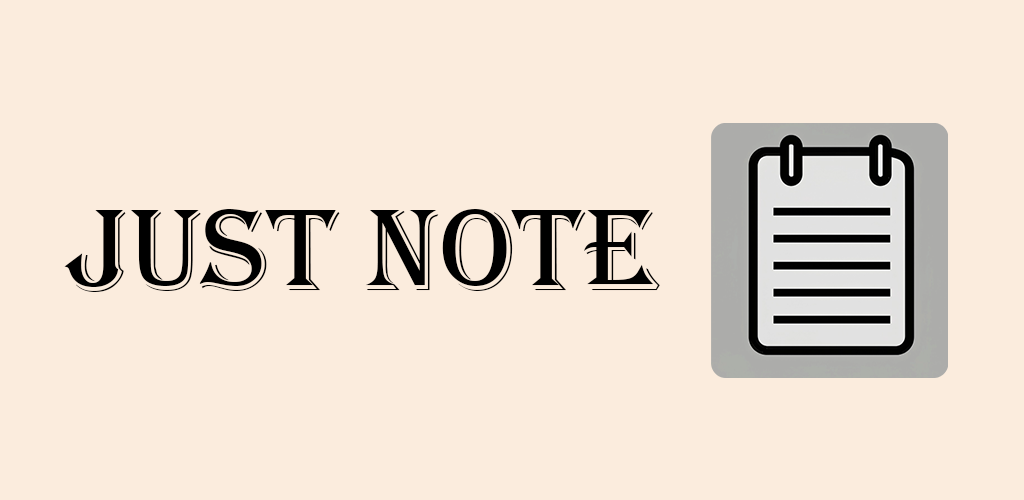
<style>
.page{position:relative;width:1024px;height:500px;background:#fbecdd}
.page>*{position:absolute;margin:0}
.t1{font:120px "Algerian";color:#000000}
</style>
<div class="page">
<p class="t1" style="left:64px;top:209px;width:596px;height:83px">Just Note</p>
</div>
